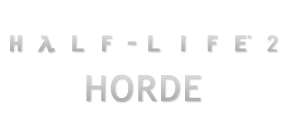
<style>
.page{position:relative;width:288px;height:128px;background:#ffffff}
.page>*{position:absolute;margin:0}
.t1{font:22px "HalfLife2";letter-spacing:0.025em;color:#c5c4c4;font-weight:bold}
.t2{font:36px "TrebuchetMS";letter-spacing:0.025em;color:#c6c5c5;font-weight:bold}
</style>
<div class="page">
<p class="t1" style="left:10px;top:35px;width:267px;height:18px">HALF-LIFE 2</p>
<p class="t2" style="left:86px;top:74px;width:115px;height:28px">HORDE</p>
</div>
